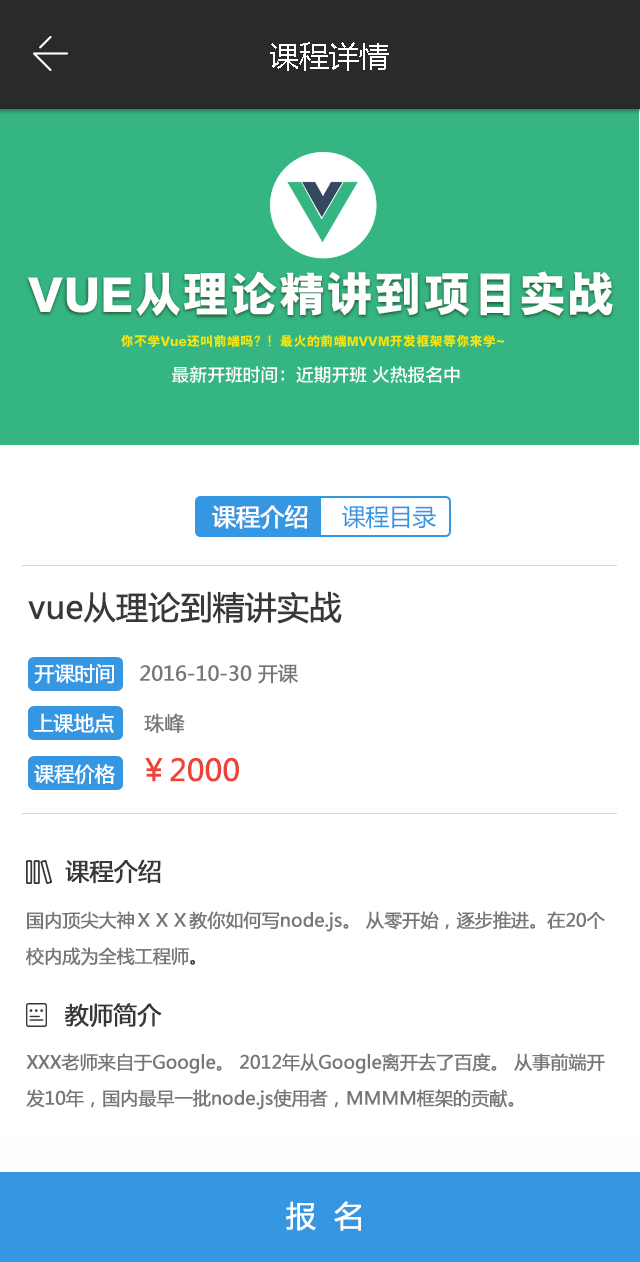
<style>
.page{position:relative;width:640px;height:1262px;background:#ffffff}
.page>*{position:absolute;margin:0}
.t1{font:30px "MicrosoftYaHei";color:#ffffff}
.t2{font:24px "MicrosoftYaHei";letter-spacing:-0.02em;color:#ffffff;font-weight:bold}
.t3{font:24px "MicrosoftYaHei";letter-spacing:-0.02em;color:#3596e2}
.t4{font:32px "MicrosoftYaHei";letter-spacing:-0.02em;color:#383838;font-weight:bold}
.t5{font:20px "MicrosoftYaHei";letter-spacing:-0.02em;color:#777777;font-weight:bold}
.t6{font:20px "MicrosoftYaHei";letter-spacing:-0.02em;color:#fefefe;font-weight:bold}
.t7{font:20px "MicrosoftYaHei";letter-spacing:-0.02em;color:#ffffff;font-weight:bold}
.t8{font:30px "MicrosoftYaHei";letter-spacing:-0.02em;color:#ee4339;font-weight:bold}
.t9{font:24px "MicrosoftYaHei";letter-spacing:-0.02em;color:#383838;font-weight:bold}
.t10{font:18px/18px "MicrosoftYaHei";letter-spacing:-0.02em;color:#777777;font-weight:bold}
.t11{font:18px/18px "MicrosoftYaHei";letter-spacing:-0.02em;color:#383838;font-weight:bold}
.t12{font:30px "MicrosoftYaHei";letter-spacing:-0.02em;color:#ffffff;font-weight:bold}
</style>
<div class="page">
<p class="t1" style="left:270px;top:42px;width:119px;height:29px">课程详情</p>
<p class="t2" style="left:212px;top:505px;width:96px;height:24px">课程介绍</p>
<p class="t3" style="left:342px;top:505px;width:94px;height:24px">课程目录</p>
<p class="t4" style="left:28px;top:591px;width:314px;height:33px">vue从理论到精讲实战</p>
<p class="t5" style="left:34px;top:663px;width:264px;height:21px"><span class="t6">开课时间</span>    2016-10-30 开课</p>
<p class="t7" style="left:33px;top:713px;width:152px;height:20px"><span class="t5"><br> <br></span>上课地点<span class="t5">     珠峰</span></p>
<p class="t8" style="left:34px;top:757px;width:205px;height:28px"><span class="t7">课程价格    </span>￥2000</p>
<p class="t9" style="left:65px;top:859px;width:96px;height:25px">课程介绍</p>
<p class="t10" style="left:26px;top:911px;width:579px;height:55px">国内顶尖大神ＸＸＸ教你如何写node.js。 从零开始，逐步推进。在20个<br><br>校内成为全栈工程师<span class="t11">。</span></p>
<p class="t9" style="left:64px;top:1003px;width:98px;height:24px">教师简介</p>
<p class="t10" style="left:26px;top:1053px;width:579px;height:57px">XXX老师来自于Google。 2012年从Google离开去了百度。 从事前端开<br><br>发10年，国内最早一批node.js使用者，MMMM框架的贡献。</p>
<p class="t12" style="left:286px;top:1201px;width:75px;height:30px">报  名</p>
</div>
